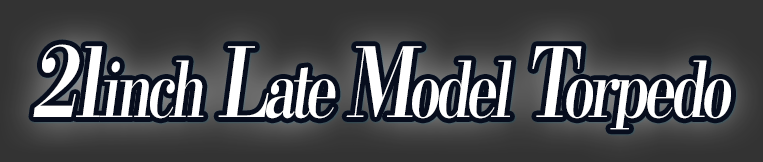
<style>
.page{position:relative;width:763px;height:162px}
.page>*{position:absolute;margin:0}
.t1{font:76.8px "KochoStd-Heavy";letter-spacing:-0.08em;color:#ffffff;font-style:italic;scale:0.75 1}
.t2{font:96px "KochoStd-Heavy";letter-spacing:-0.08em;color:#ffffff;font-style:italic;scale:0.75 1}
</style>
<div class="page">
<p class="t1" style="left:33px;top:44px;width:698px;height:86px"><span class="t2">21</span>inch<span class="t2"> L</span>ate <span class="t2">M</span>odel<span class="t2"> T</span>orpedo</p>
</div>
